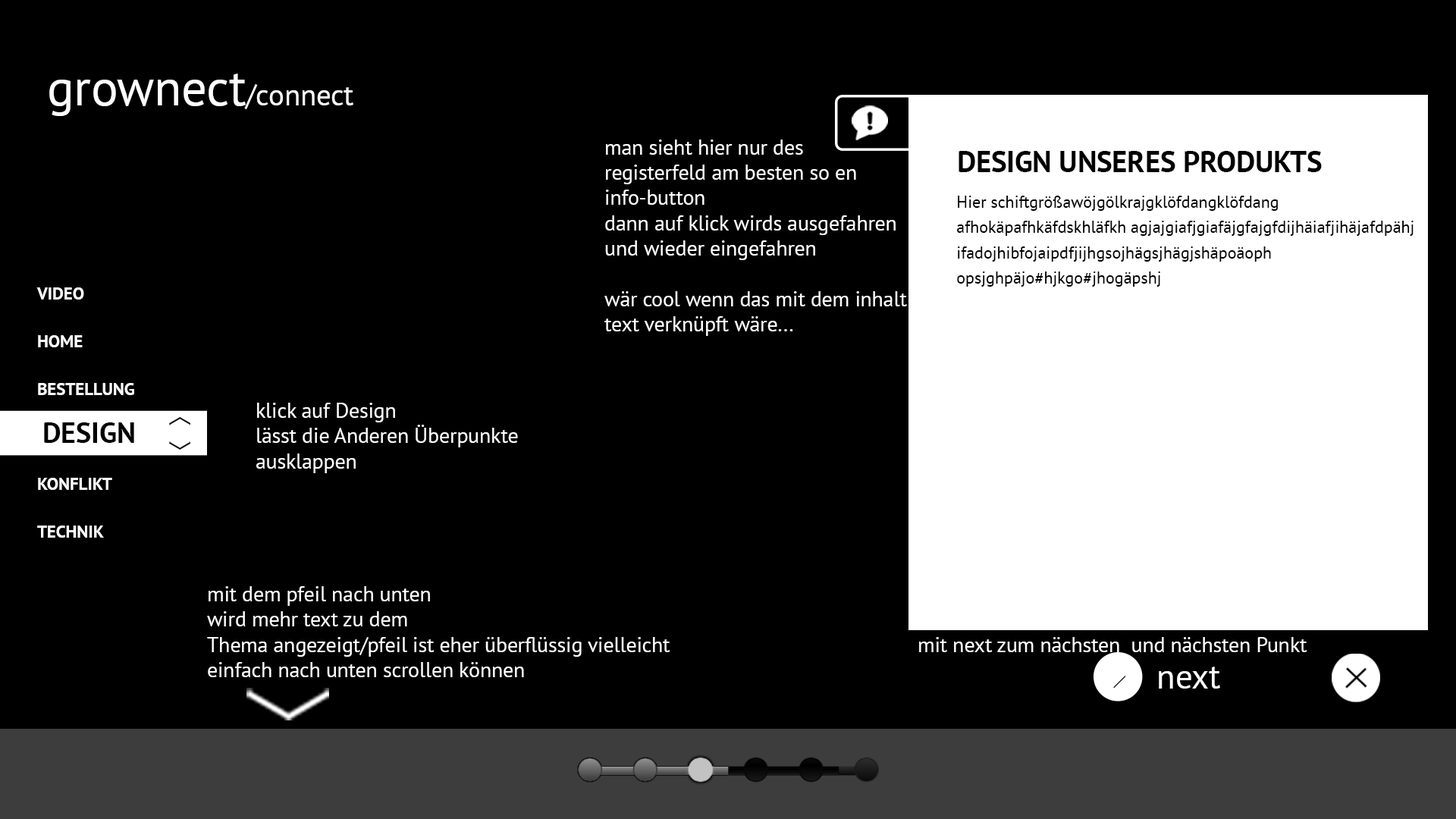
<style>
.page{position:relative;width:1456px;height:819px;background:#000000}
.page>*{position:absolute;margin:0}
.t1{font:50.6px "PTSans-Regular";letter-spacing:-0.005em;color:#ffffff}
.t2{font:29.5px "PTSans-Regular";letter-spacing:-0.005em;color:#ffffff}
.t3{font:21px/25.2px "PTSans-Regular";letter-spacing:-0.005em;color:#ffffff}
.t4{font:29.5px "PTSans-Bold";letter-spacing:-0.005em;color:#000000}
.t5{font:16.9px/25.3px "PTSans-Regular";letter-spacing:-0.005em;color:#000000}
.t6{font:17.4px/47.6px "PTSans-Bold";letter-spacing:-0.005em;color:#ffffff}
.t7{font:21.1px/25.3px "PTSans-Regular";letter-spacing:-0.005em;color:#ffffff}
.t8{font:29px "PTSans-Bold";letter-spacing:-0.005em;color:#000000}
.t9{font:21.1px "PTSans-Regular";letter-spacing:-0.005em;color:#ffffff}
.t10{font:34.6px "PTSans-Regular";letter-spacing:-0.005em;color:#ffffff}
</style>
<div class="page">
<p class="t1" style="left:49px;top:74px;width:304px;height:42px">grownect<span class="t2">/connect</span></p>
<p class="t3" style="left:604px;top:140px;width:303px;height:196px">man sieht hier nur des<br>registerfeld am besten so en<br>info-button<br>dann auf klick wirds ausgefahren<br>und wieder eingefahren<br><br>wär cool wenn das mit dem inhalt<br>text verknüpft wäre...</p>
<p class="t4" style="left:959px;top:151px;width:363px;height:21px">DESIGN UNSERES PRODUKTS</p>
<p class="t5" style="left:957px;top:196px;width:457px;height:91px">Hier schiftgrößawöjgölkrajgklöfdangklöfdang<br>afhokäpafhkäfdskhläfkh agjajgiafjgiafäjgfajgfdijhäiafjihäjafdpähj<br>ifadojhibfojaipdfjijhgsojhägsjhägjshäpoäoph<br>opsjghpäjo#hjkgo#jhogäpshj</p>
<p class="t6" style="left:36px;top:287px;width:98px;height:251px">VIDEO<br>HOME<br>BESTELLUNG<br>RECHERCHE<br>KONFLIKT<br>TECHNIK</p>
<p class="t7" style="left:256px;top:403px;width:262px;height:70px">klick auf Design<br>lässt die Anderen Überpunkte<br>ausklappen</p>
<p class="t8" style="left:44px;top:422px;width:90px;height:21px">DESIGN</p>
<p class="t7" style="left:207px;top:586px;width:463px;height:91px">mit dem pfeil nach unten <br>wird mehr text zu dem<br>Thema angezeigt/pfeil ist eher überflüssig vielleicht<br>einfach nach unten scrollen können</p>
<p class="t9" style="left:919px;top:637px;width:388px;height:15px">mit next zum nächsten  und nächsten Punkt</p>
<p class="t10" style="left:1159px;top:667px;width:61px;height:22px">next</p>
</div>
